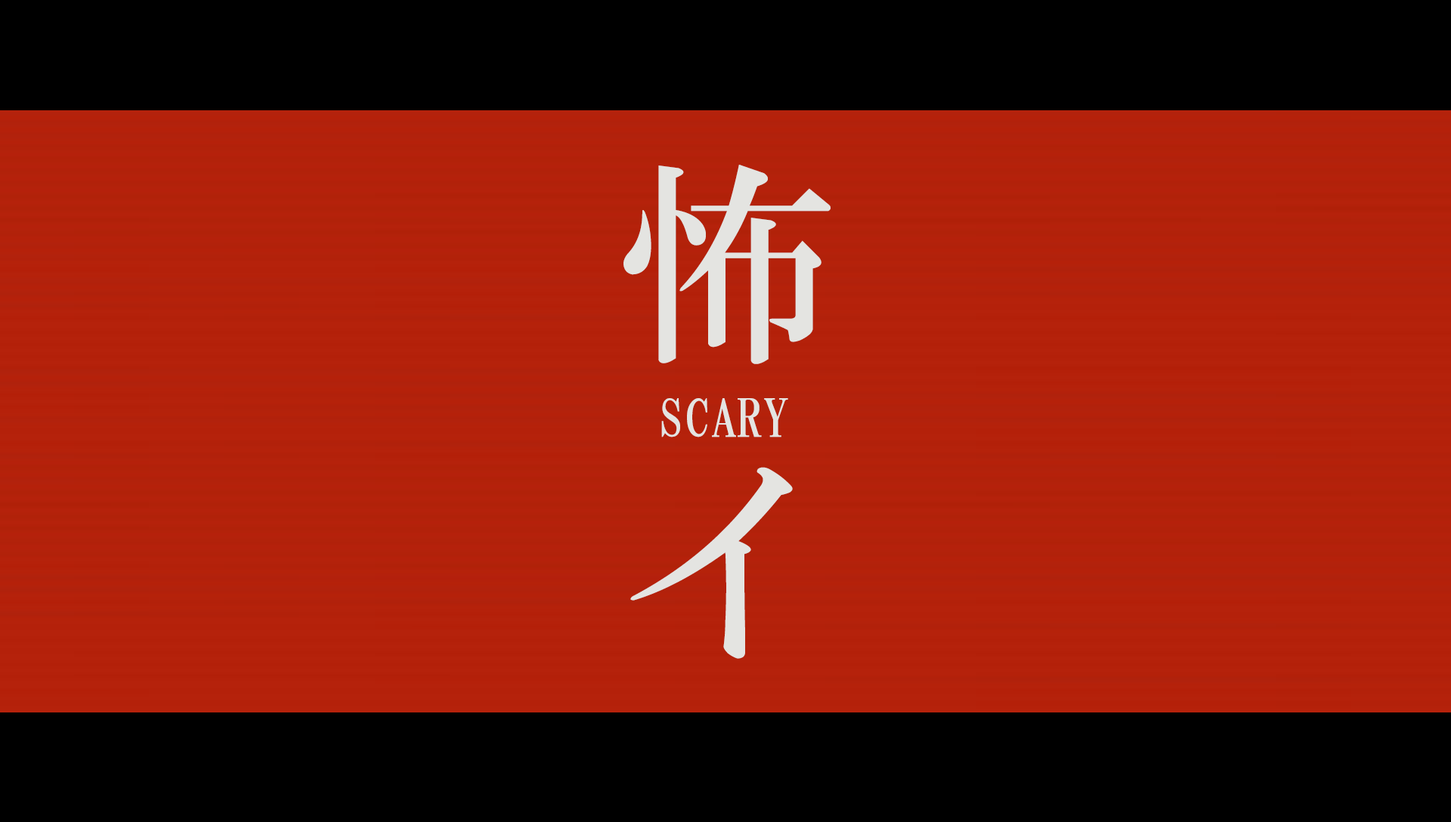
<style>
.page{position:relative;width:1451px;height:822px;background:#000000}
.page>*{position:absolute;margin:0}
.t1{font:219.1px/300.2px "HGMinchoB";letter-spacing:0.29em;color:#e4e4e1}
.t2{font:52.4px "HGMinchoB";color:#e4e4e1;text-transform:uppercase}
</style>
<div class="page">
<p class="t1" style="left:623px;top:165px;width:207px;height:494px">怖<br>イ</p>
<p class="t2" style="left:661px;top:398px;width:127px;height:39px">Scary</p>
</div>
